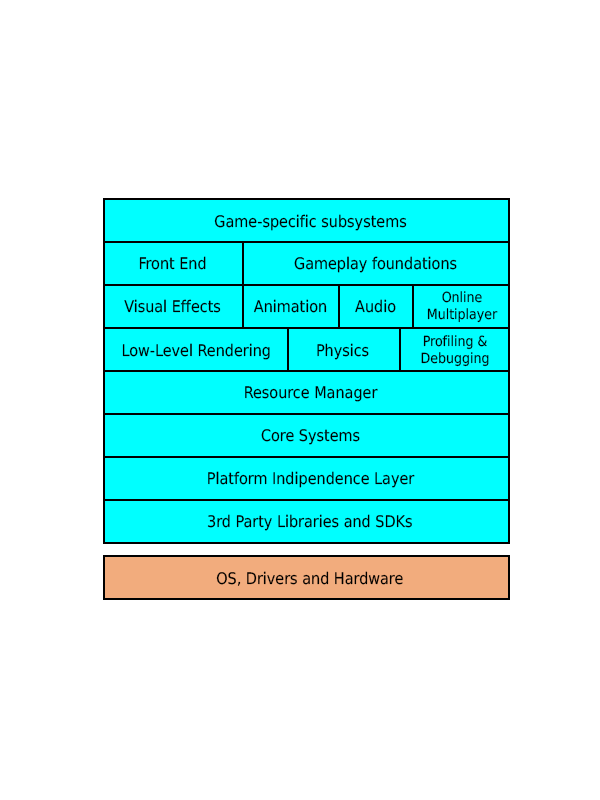
<style>
.page{position:relative;width:600px;height:800px;background:#ffffff}
.page>*{position:absolute;margin:0}
.t1{font:16px "DejaVuSansCondensed";color:#000000}
.t2{font:14px "DejaVuSansCondensed";color:#000000}
</style>
<div class="page">
<p class="t1" style="left:214px;top:214px;width:193px;height:17px">Game-specific subsystems</p>
<p class="t1" style="left:139px;top:256px;width:67px;height:14px">Front End</p>
<p class="t1" style="left:294px;top:256px;width:163px;height:17px">Gameplay foundations</p>
<p class="t2" style="left:427px;top:291px;width:71px;height:32px;text-align:center">Online<br>Multiplayer</p>
<p class="t1" style="left:124px;top:299px;width:97px;height:14px">Visual Effects</p>
<p class="t1" style="left:253px;top:299px;width:74px;height:14px">Animation</p>
<p class="t1" style="left:355px;top:299px;width:41px;height:14px">Audio</p>
<p class="t2" style="left:421px;top:335px;width:68px;height:32px;text-align:center">Profiling &amp;<br>Debugging</p>
<p class="t1" style="left:122px;top:343px;width:148px;height:17px">Low-Level Rendering</p>
<p class="t1" style="left:317px;top:343px;width:52px;height:17px">Physics</p>
<p class="t1" style="left:245px;top:386px;width:133px;height:16px">Resource Manager</p>
<p class="t1" style="left:261px;top:429px;width:99px;height:16px">Core Systems</p>
<p class="t1" style="left:208px;top:471px;width:207px;height:17px">Platform Indipendence Layer</p>
<p class="t1" style="left:207px;top:514px;width:205px;height:17px">3rd Party Libraries and SDKs</p>
<p class="t1" style="left:216px;top:571px;width:187px;height:15px">OS, Drivers and Hardware</p>
</div>
